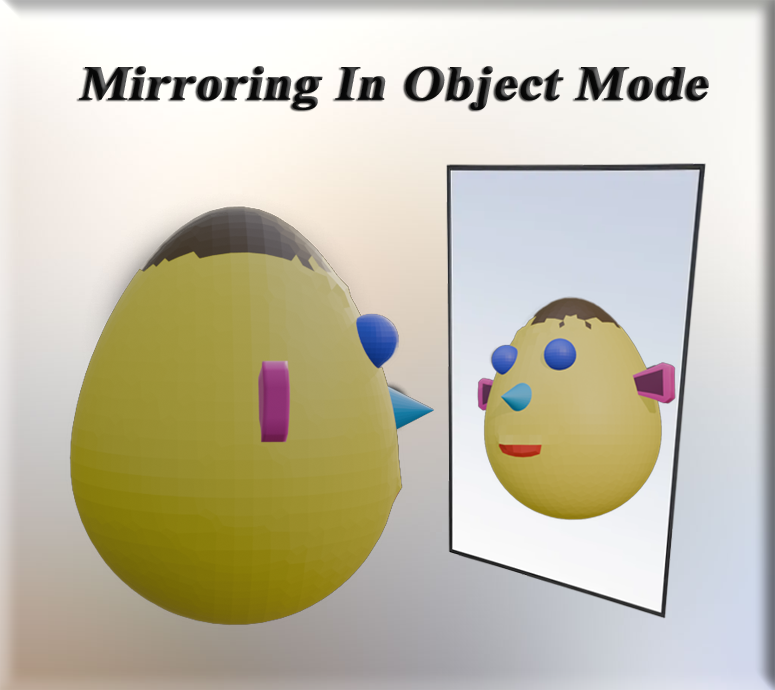
<style>
.page{position:relative;width:775px;height:690px}
.page>*{position:absolute;margin:0}
.t1{font:48.4px "TimesNewRomanPS-BoldMT";color:#0b0b0b;font-weight:bold;font-style:italic;scale:1.08 1}
</style>
<div class="page">
<p class="t1" style="left:79px;top:66px;width:630px;height:44px">Mirroring In Object Mode</p>
</div>
